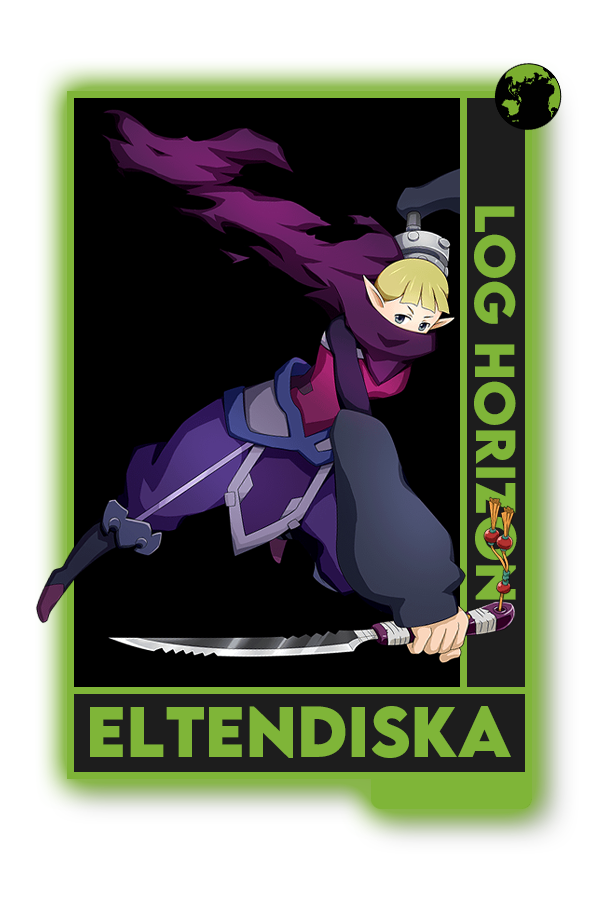
<style>
.page{position:relative;width:600px;height:900px;background:#000000}
.page>*{position:absolute;margin:0}
.t1{font:50px "LEMONMILK-Bold";color:#7fad41}
.t2{font:63.9px "LEMONMILK-Bold";color:#7fad41}
</style>
<div class="page">
<p class="t1" style="left:474px;top:206px;width:43px;height:394px;rotate:90deg">Log Horizon</p>
<p class="t2" style="left:90px;top:706px;width:421px;height:52px">Eltendiska</p>
</div>
